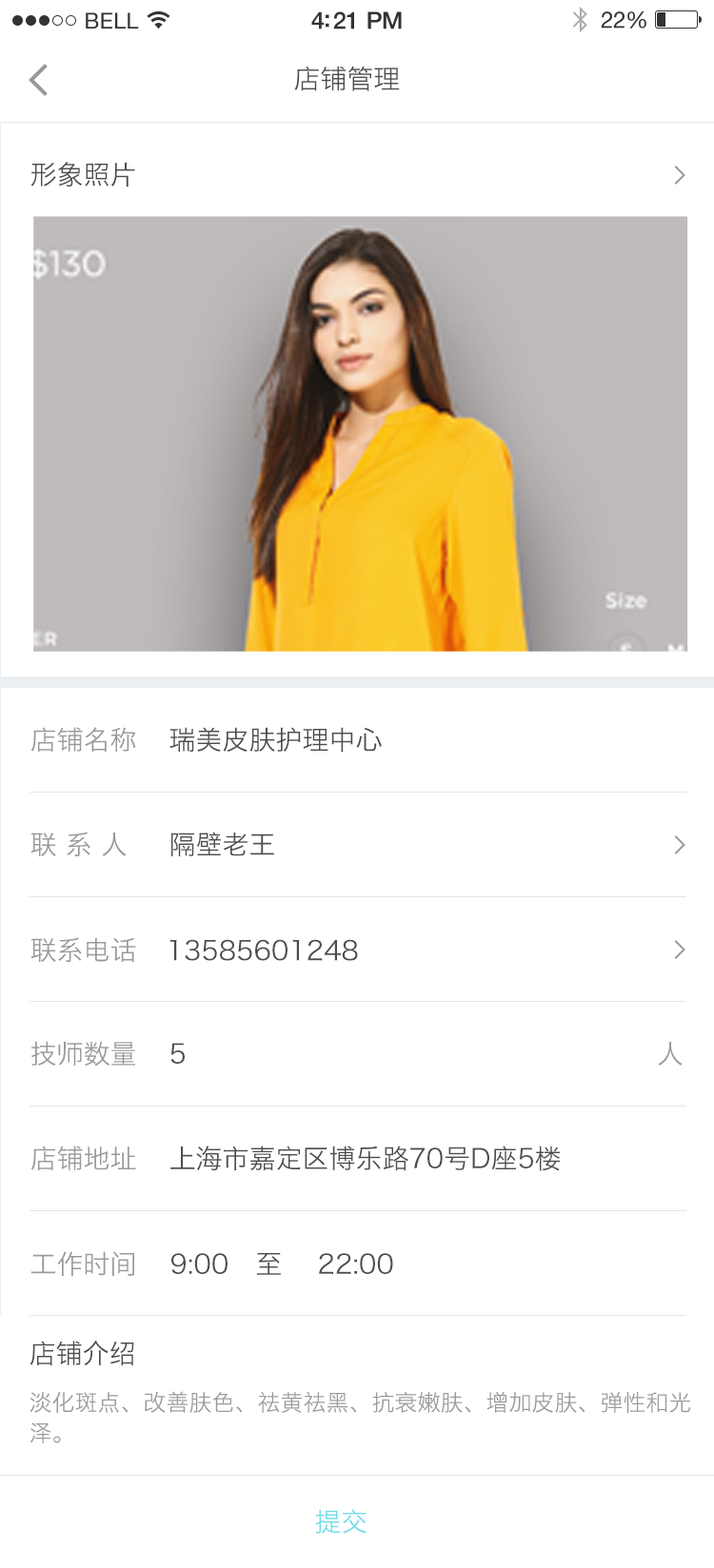
<style>
.page{position:relative;width:714px;height:1568px;background:#ffffff}
.page>*{position:absolute;margin:0}
.t1{font:26.6px "HiraginoSansGB-W3";color:#4d4d4d}
.t2{font:26.6px "HiraginoSansGB-W3";color:#999999}
.t3{font:26.6px "HiraginoSansGB-W3";color:#4c4c4c}
.t4{font:22.8px/30.4px "HiraginoSansGB-W3";color:#999999}
.t5{font:26.6px "HiraginoSansGB-W3";color:#73dce6}
</style>
<div class="page">
<p class="t1" style="left:294px;top:66px;width:106px;height:25px">店铺管理</p>
<p class="t1" style="left:30px;top:162px;width:105px;height:25px">形象照片</p>
<p class="t2" style="left:30px;top:727px;width:106px;height:25px">店铺名称</p>
<p class="t3" style="left:169px;top:727px;width:213px;height:26px">瑞美皮肤护理中心</p>
<p class="t2" style="left:30px;top:832px;width:97px;height:24px">联 系 人</p>
<p class="t1" style="left:170px;top:832px;width:104px;height:25px">隔壁老王</p>
<p class="t2" style="left:30px;top:937px;width:106px;height:25px">联系电话</p>
<p class="t3" style="left:170px;top:939px;width:188px;height:22px">13585601248</p>
<p class="t2" style="left:31px;top:1041px;width:104px;height:26px">技师数量</p>
<p class="t3" style="left:170px;top:1042px;width:512px;height:24px">5                                                     <span class="t2">人</span></p>
<p class="t2" style="left:30px;top:1146px;width:106px;height:24px">店铺地址</p>
<p class="t1" style="left:170px;top:1146px;width:389px;height:25px">上海市嘉定区博乐路70号D座5楼</p>
<p class="t2" style="left:31px;top:1251px;width:103px;height:26px">工作时间</p>
<p class="t1" style="left:171px;top:1252px;width:222px;height:23px">9:00   至    22:00</p>
<p class="t3" style="left:29px;top:1341px;width:105px;height:24px">店铺介绍</p>
<p class="t4" style="left:29px;top:1391px;width:661px;height:52px;text-align:justify">淡化斑点、改善肤色、祛黄祛黑、抗衰嫩肤、增加皮肤、弹性和光<br>泽。</p>
<p class="t5" style="left:315px;top:1509px;width:51px;height:25px">提交</p>
</div>
